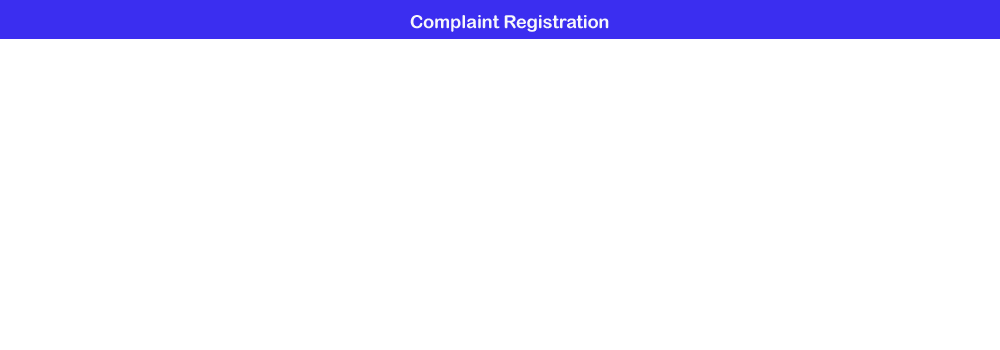
<style>
.page{position:relative;width:1000px;height:350px;background:#ffffff}
.page>*{position:absolute;margin:0}
.t1{font:18px "ArialRoundedMTBold";color:#f7f7fb}
</style>
<div class="page">
<p class="t1" style="left:410px;top:15px;width:199px;height:17px">Complaint Registration</p>
</div>
